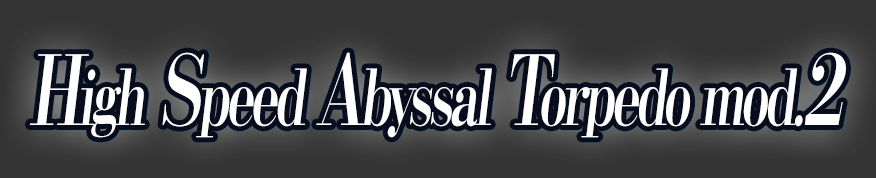
<style>
.page{position:relative;width:876px;height:178px;background:#333333}
.page>*{position:absolute;margin:0}
.t1{font:76.8px "KochoStd-Heavy";letter-spacing:-0.08em;color:#ffffff;font-style:italic;scale:0.68 1}
.t2{font:96px "KochoStd-Heavy";letter-spacing:-0.08em;color:#ffffff;font-style:italic;scale:0.68 1}
</style>
<div class="page">
<p class="t1" style="left:29px;top:52px;width:817px;height:86px"><span class="t2">H</span>igh<span class="t2"> S</span>peed <span class="t2">A</span>byssal<span class="t2"> T</span>orpedo mod.<span class="t2">2</span></p>
</div>
